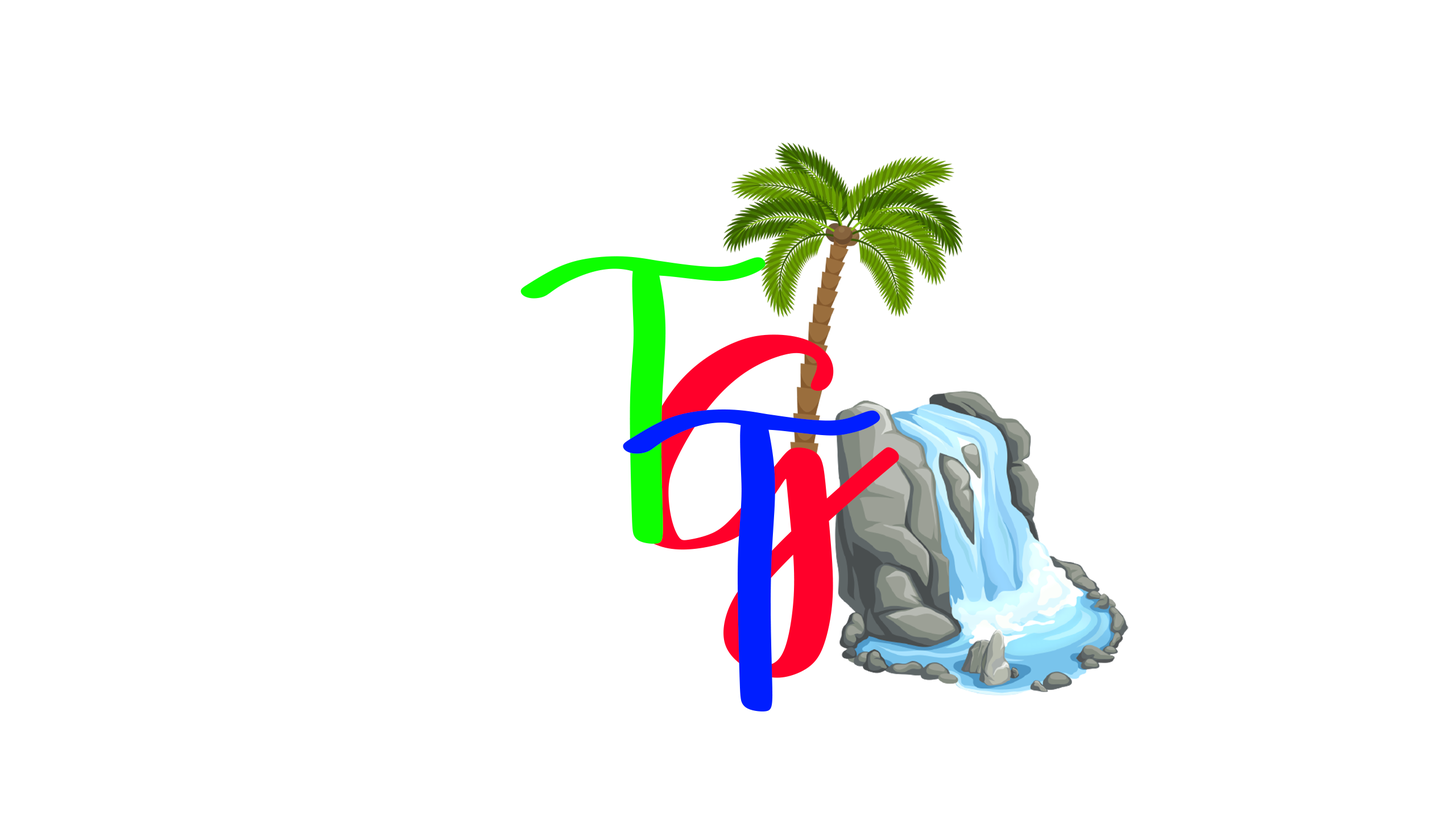
<style>
.page{position:relative;width:1456px;height:819px;background:#ffffff}
.page>*{position:absolute;margin:0}
.t1{font:326.5px "CaseyMartinRegular";letter-spacing:0.07em;color:#0dff00}
.t2{font:391.7px "CaseyMartinRegular";letter-spacing:0.07em;color:#ff002a;scale:1.31 1}
.t3{font:343px "CaseyMartinRegular";letter-spacing:0.07em;color:#001eff}
</style>
<div class="page">
<p class="t1" style="left:520px;top:256px;width:246px;height:288px">T</p>
<p class="t2" style="left:631px;top:334px;width:268px;height:344px">G</p>
<p class="t3" style="left:623px;top:409px;width:257px;height:302px">T</p>
</div>
